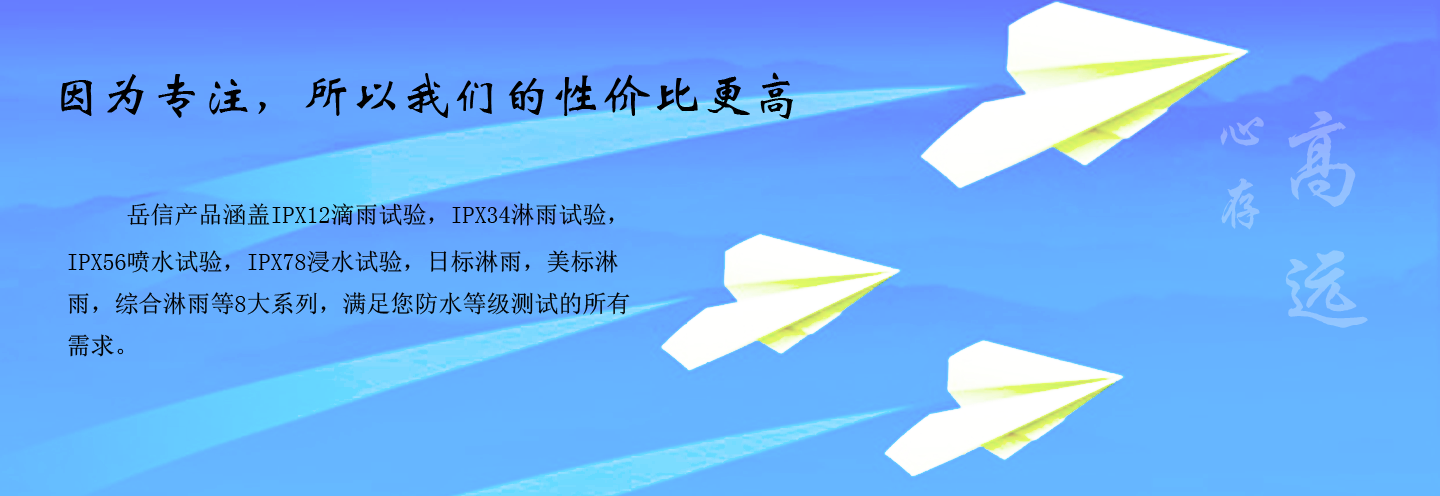
<style>
.page{position:relative;width:1440px;height:496px}
.page>*{position:absolute;margin:0}
.t1{font:50px "STXinwei";color:#000000}
.t2{font:100px "FZXKJW--GB1-0";color:#93c4ff}
.t3{font:56px "FZXKJW--GB1-0";color:#93c0ff}
.t4{font:24px "SimSun";color:#000000}
.t5{font:30px "SimSun";color:#000000}
</style>
<div class="page">
<p class="t1" style="left:61px;top:72px;width:732px;height:47px">因为专注，所以我们的性价比更高</p>
<p class="t2" style="left:1285px;top:111px;width:83px;height:217px">高 远</p>
<p class="t3" style="left:1220px;top:116px;width:44px;height:114px">心 存</p>
<p class="t4" style="left:68px;top:203px;width:562px;height:154px"><span class="t5">    </span>岳信产品涵盖IPX12滴雨试验，IPX34淋雨试验，<br>IPX56喷水试验，IPX78浸水试验，日标淋雨，美标淋<br>雨，综合淋雨等8大系列，满足您防水等级测试的所有<br>需求。</p>
</div>
